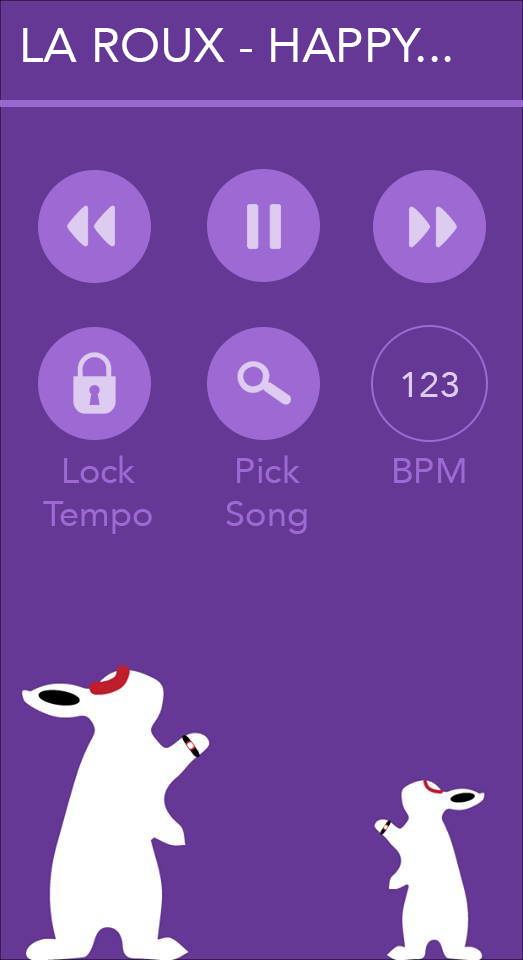
<style>
.page{position:relative;width:523px;height:960px;background:#653895}
.page>*{position:absolute;margin:0}
.t1{font:48px "Avenir-Roman";color:#ffffff}
.t2{font:36px "Avenir-Roman";color:#deccf0}
.t3{font:36px "Avenir-Roman";color:#9d6ad4}
</style>
<div class="page">
<p class="t1" style="left:23px;top:28px;width:428px;height:34px">LA  ROUX - HAPPY...</p>
<p class="t2" style="left:402px;top:372px;width:56px;height:25px">123</p>
<p class="t3" style="left:43px;top:455px;width:109px;height:79px;text-align:center">Lock<br>Tempo</p>
<p class="t3" style="left:226px;top:455px;width:81px;height:79px;text-align:center">Pick<br>Song</p>
<p class="t3" style="left:394px;top:458px;width:71px;height:25px">BPM</p>
</div>
